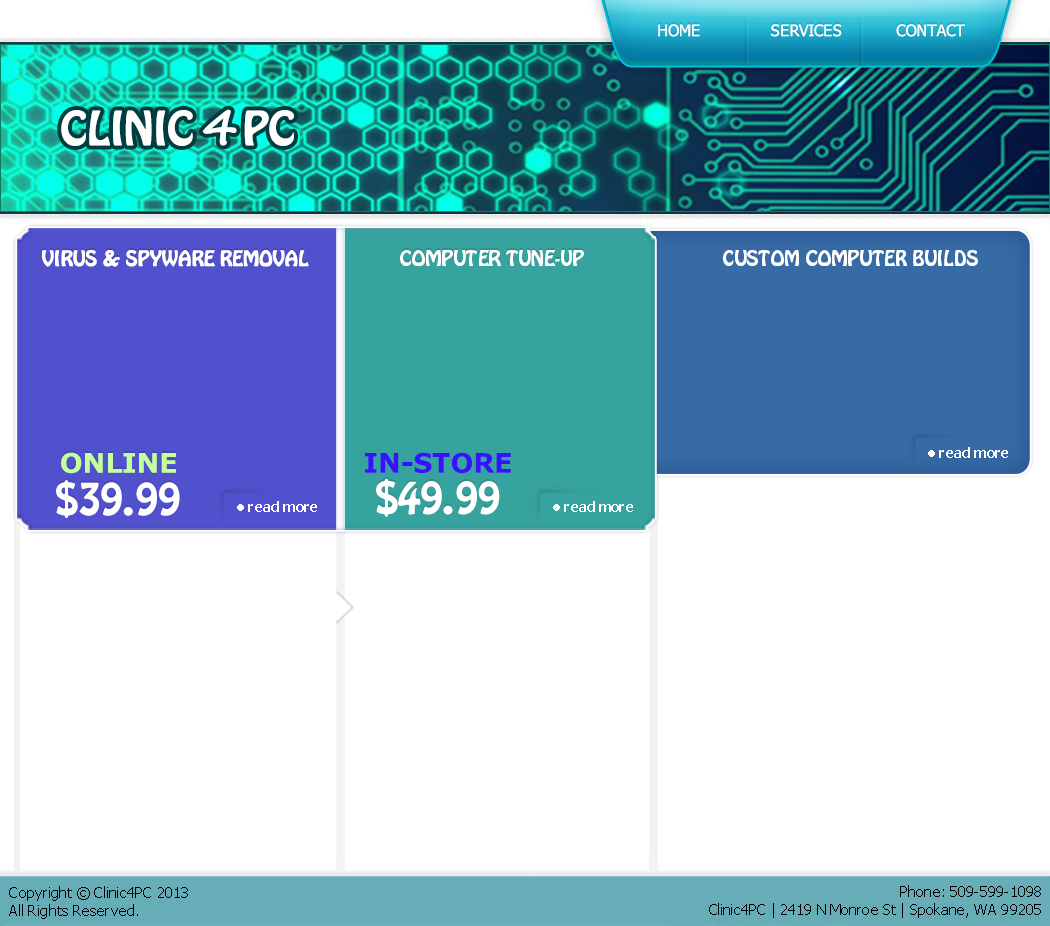
<style>
.page{position:relative;width:1050px;height:926px;background:#ffffff}
.page>*{position:absolute;margin:0}
.t1{font:16px "Tahoma";color:#ffffff;text-transform:uppercase}
.t2{font:42px "HoboStd";color:#ffffff;text-transform:uppercase}
.t3{font:48.6px "SegoePrint-Bold";color:#ffffff;text-transform:uppercase}
.t4{font:19px "HoboStd";color:#ffffff}
.t5{font:19px "HoboStd";color:#ffffff;text-transform:uppercase}
.t6{font:14px "Tahoma-Bold";color:#ffffff}
.t7{font:27px "Verdana-Bold";color:#c5ff9b;text-transform:uppercase}
.t8{font:27px "Verdana-Bold";color:#3811fe;text-transform:uppercase}
.t9{font:40px "HoboStd";color:#ffffff;text-transform:uppercase}
.t10{font:15px "Tahoma";color:#000000}
</style>
<div class="page">
<p class="t1" style="left:658px;top:24px;width:307px;height:13px">HOME             SERVICES          Contact</p>
<p class="t2" style="left:61px;top:110px;width:233px;height:36px">Clinic    PC</p>
<p class="t3" style="left:202px;top:109px;width:35px;height:37px">4</p>
<p class="t4" style="left:42px;top:250px;width:267px;height:17px">VIRUS &amp; SPYWARE REMOVAL</p>
<p class="t5" style="left:400px;top:250px;width:184px;height:16px">COMPUTER TUNE-UP</p>
<p class="t4" style="left:723px;top:250px;width:255px;height:16px">CUSTOM COMPUTER BUILDS</p>
<p class="t6" style="left:928px;top:447px;width:80px;height:11px">• read more</p>
<p class="t7" style="left:61px;top:452px;width:115px;height:22px">ONLINE</p>
<p class="t8" style="left:365px;top:452px;width:146px;height:22px">IN-STORE</p>
<p class="t9" style="left:56px;top:480px;width:124px;height:38px">$39.99</p>
<p class="t9" style="left:376px;top:479px;width:124px;height:38px">$49.99</p>
<p class="t6" style="left:237px;top:501px;width:80px;height:11px">• read more</p>
<p class="t6" style="left:553px;top:501px;width:80px;height:11px">• read more</p>
<p class="t10" style="left:9px;top:886px;width:179px;height:33px">Copyright © Clinic4PC 2013<br>All Rights Reserved.</p>
<p class="t10" style="left:709px;top:885px;width:332px;height:33px;text-align:right">Phone: 509-599-1098<br>Clinic4PC | 2419 N Monroe St | Spokane, WA 99205</p>
</div>
